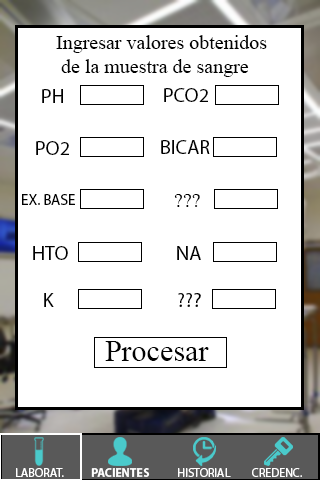
<style>
.page{position:relative;width:320px;height:480px;background:#ffffff}
.page>*{position:absolute;margin:0}
.t1{font:20px "MyriadPro-Regular";color:#020202}
.t2{font:20px "MyriadPro-Regular";color:#000000}
.t3{font:15px "MyriadPro-Regular";color:#000000}
.t4{font:30px "MyriadPro-Regular";color:#020202}
.t5{font:12px "MyriadPro-Regular";color:#ffffff}
.t6{font:12px "MyriadPro-Bold";color:#ffffff}
.t7{font:12px "MyriadPro-Regular";color:#fefefe}
</style>
<div class="page">
<p class="t1" style="left:56px;top:35px;width:211px;height:42px">Ingresar valores obtenidos<br> de la muestra de sangre</p>
<p class="t2" style="left:42px;top:89px;width:21px;height:14px">PH</p>
<p class="t2" style="left:164px;top:88px;width:44px;height:14px">PCO2</p>
<p class="t2" style="left:36px;top:141px;width:33px;height:14px">PO2</p>
<p class="t2" style="left:161px;top:140px;width:49px;height:14px">BICAR</p>
<p class="t3" style="left:22px;top:194px;width:53px;height:11px">EX. BASE</p>
<p class="t2" style="left:174px;top:194px;width:26px;height:13px">???</p>
<p class="t2" style="left:33px;top:246px;width:35px;height:14px">HTO</p>
<p class="t2" style="left:177px;top:246px;width:24px;height:14px">NA</p>
<p class="t2" style="left:44px;top:293px;width:10px;height:14px">K</p>
<p class="t2" style="left:178px;top:293px;width:23px;height:14px">???</p>
<p class="t4" style="left:105px;top:341px;width:104px;height:20px">Procesar</p>
<p class="t5" style="left:16px;top:468px;width:48px;height:9px">LABORAT.</p>
<p class="t6" style="left:91px;top:468px;width:59px;height:9px">PACIENTES</p>
<p class="t7" style="left:178px;top:468px;width:53px;height:9px">HISTORIAL</p>
<p class="t5" style="left:252px;top:468px;width:50px;height:9px">CREDENC.</p>
</div>
